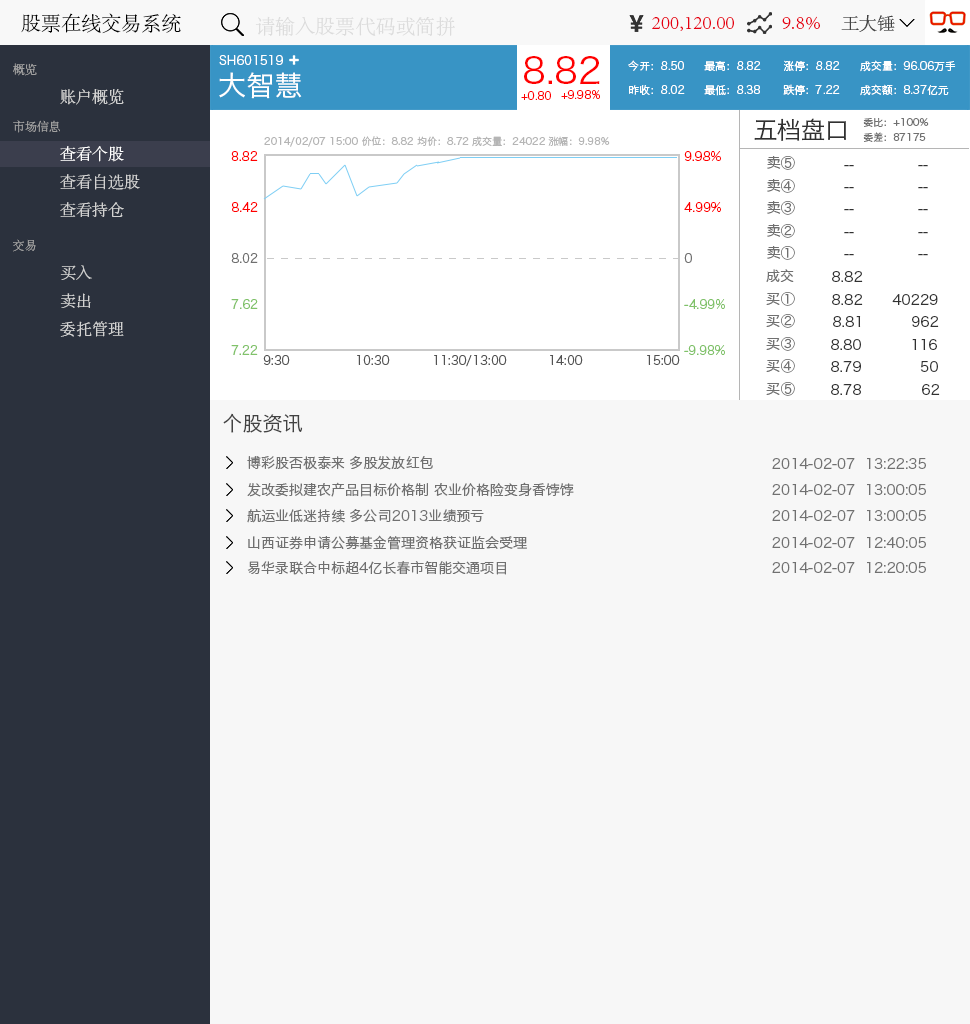
<style>
.page{position:relative;width:970px;height:1024px;background:#f7f7f7}
.page>*{position:absolute;margin:0}
.t1{font:20px "AdobeSongStd-Light";color:#000000}
.t2{font:20px "AdobeSongStd-Light";color:#dcdcdc}
.t3{font:20px "AdobeSongStd-Light";color:#e60012}
.t4{font:18px "AdobeSongStd-Light";color:#434343}
.t5{font:12px "AdobeSongStd-Light";color:#a0a0a0}
.t6{font:12px "HiraginoSansGB-W3";color:#ffffff}
.t7{font:36px "HiraginoSansGB-W3";color:#ff0000}
.t8{font:10.7px "HiraginoSansGB-W3";color:#ffffff}
.t9{font:28px "HiraginoSansGB-W3";color:#ffffff}
.t10{font:16px "AdobeSongStd-Light";color:#d2d2d2}
.t11{font:10.7px "HiraginoSansGB-W3";color:#ff0000}
.t12{font:24px "HiraginoSansGB-W3";color:#313131}
.t13{font:10px "HiraginoSansGB-W3";color:#707070}
.t14{font:10px "HiraginoSansGB-W3";color:#b5b5b5}
.t15{font:16px "AdobeSongStd-Light";color:#ffffff}
.t16{font:12px "HiraginoSansGB-W3";color:#ff0000}
.t17{font:14px "HiraginoSansGB-W3";color:#707070}
.t18{font:14px "HiraginoSansGB-W3";color:#313131}
.t19{font:12px "HiraginoSansGB-W3";color:#707070}
.t20{font:12px "HiraginoSansGB-W3";color:#80c269}
.t21{font:12px "HiraginoSansGB-W3";color:#535353}
.t22{font:20px "HiraginoSansGB-W3";color:#434343}
</style>
<div class="page">
<p class="t1" style="left:21px;top:13px;width:160px;height:21px">股票在线交易系统</p>
<p class="t2" style="left:255px;top:16px;width:200px;height:21px">请输入股票代码或简拼</p>
<p class="t3" style="left:652px;top:17px;width:82px;height:14px">200,120.00</p>
<p class="t3" style="left:782px;top:16px;width:38px;height:14px">9.8%</p>
<p class="t4" style="left:841px;top:15px;width:54px;height:17px">王大锤</p>
<p class="t5" style="left:13px;top:63px;width:24px;height:13px">概览</p>
<p class="t6" style="left:219px;top:55px;width:64px;height:10px">SH601519</p>
<p class="t7" style="left:524px;top:56px;width:76px;height:29px">8.82</p>
<p class="t8" style="left:628px;top:60px;width:56px;height:11px">今开：8.50</p>
<p class="t8" style="left:704px;top:61px;width:57px;height:11px">最高：8.82</p>
<p class="t8" style="left:784px;top:60px;width:56px;height:12px">涨停：8.82</p>
<p class="t8" style="left:860px;top:60px;width:96px;height:12px">成交量：96.06万手</p>
<p class="t9" style="left:219px;top:72px;width:83px;height:27px">大智慧</p>
<p class="t10" style="left:60px;top:89px;width:64px;height:16px">账户概览</p>
<p class="t8" style="left:629px;top:85px;width:56px;height:10px">昨收：8.02</p>
<p class="t8" style="left:704px;top:85px;width:56px;height:11px">最低：8.38</p>
<p class="t8" style="left:783px;top:84px;width:57px;height:12px">跌停：7.22</p>
<p class="t8" style="left:860px;top:84px;width:89px;height:12px">成交额：8.37亿元</p>
<p class="t11" style="left:521px;top:91px;width:30px;height:9px">+0.80</p>
<p class="t11" style="left:561px;top:90px;width:39px;height:9px">+9.98%</p>
<p class="t5" style="left:13px;top:120px;width:47px;height:13px">市场信息</p>
<p class="t12" style="left:754px;top:118px;width:92px;height:23px">五档盘口</p>
<p class="t13" style="left:863px;top:118px;width:66px;height:9px">委比：+100%</p>
<p class="t14" style="left:264px;top:136px;width:346px;height:11px">2014/02/07 15:00 价位：8.82 均价：8.72 成交量：24022 涨幅：9.98%</p>
<p class="t13" style="left:863px;top:132px;width:63px;height:10px">委差：87175</p>
<p class="t15" style="left:60px;top:146px;width:64px;height:16px">查看个股</p>
<p class="t16" style="left:231px;top:151px;width:27px;height:10px">8.82</p>
<p class="t16" style="left:684px;top:151px;width:37px;height:10px">9.98%</p>
<p class="t17" style="left:767px;top:156px;width:28px;height:14px">卖⑤</p>
<p class="t10" style="left:60px;top:174px;width:80px;height:16px">查看自选股</p>
<p class="t18" style="left:844px;top:165px;width:10px;height:2px">--</p>
<p class="t18" style="left:918px;top:165px;width:10px;height:2px">--</p>
<p class="t17" style="left:767px;top:179px;width:28px;height:14px">卖④</p>
<p class="t18" style="left:844px;top:187px;width:10px;height:2px">--</p>
<p class="t18" style="left:918px;top:187px;width:10px;height:2px">--</p>
<p class="t10" style="left:60px;top:202px;width:64px;height:15px">查看持仓</p>
<p class="t16" style="left:232px;top:202px;width:26px;height:10px">8.42</p>
<p class="t16" style="left:684px;top:202px;width:37px;height:10px">4.99%</p>
<p class="t17" style="left:767px;top:201px;width:28px;height:14px">卖③</p>
<p class="t18" style="left:844px;top:209px;width:10px;height:2px">--</p>
<p class="t18" style="left:918px;top:209px;width:10px;height:2px">--</p>
<p class="t17" style="left:767px;top:224px;width:28px;height:14px">卖②</p>
<p class="t18" style="left:844px;top:232px;width:10px;height:2px">--</p>
<p class="t18" style="left:918px;top:232px;width:10px;height:2px">--</p>
<p class="t5" style="left:13px;top:239px;width:23px;height:13px">交易</p>
<p class="t17" style="left:767px;top:246px;width:28px;height:14px">卖①</p>
<p class="t19" style="left:231px;top:253px;width:27px;height:10px">8.02</p>
<p class="t19" style="left:684px;top:253px;width:8px;height:10px">0</p>
<p class="t18" style="left:844px;top:254px;width:10px;height:2px">--</p>
<p class="t18" style="left:918px;top:254px;width:10px;height:2px">--</p>
<p class="t10" style="left:60px;top:265px;width:32px;height:15px">买入</p>
<p class="t17" style="left:766px;top:269px;width:28px;height:13px">成交</p>
<p class="t18" style="left:832px;top:271px;width:31px;height:11px">8.82</p>
<p class="t10" style="left:60px;top:293px;width:31px;height:15px">卖出</p>
<p class="t17" style="left:766px;top:292px;width:29px;height:14px">买①</p>
<p class="t18" style="left:832px;top:294px;width:31px;height:11px">8.82</p>
<p class="t18" style="left:892px;top:294px;width:46px;height:11px">40229</p>
<p class="t20" style="left:231px;top:299px;width:27px;height:10px">7.62</p>
<p class="t20" style="left:684px;top:299px;width:41px;height:10px">-4.99%</p>
<p class="t17" style="left:766px;top:314px;width:29px;height:14px">买②</p>
<p class="t18" style="left:833px;top:316px;width:28px;height:11px">8.81</p>
<p class="t18" style="left:912px;top:316px;width:27px;height:11px">962</p>
<p class="t10" style="left:60px;top:321px;width:64px;height:16px">委托管理</p>
<p class="t17" style="left:766px;top:337px;width:29px;height:14px">买③</p>
<p class="t18" style="left:831px;top:339px;width:30px;height:11px">8.80</p>
<p class="t18" style="left:912px;top:339px;width:25px;height:11px">116</p>
<p class="t20" style="left:231px;top:345px;width:27px;height:10px">7.22</p>
<p class="t20" style="left:684px;top:345px;width:41px;height:10px">-9.98%</p>
<p class="t21" style="left:263px;top:355px;width:27px;height:10px">9:30</p>
<p class="t21" style="left:357px;top:355px;width:33px;height:10px">10:30</p>
<p class="t21" style="left:434px;top:355px;width:73px;height:12px">11:30/13:00</p>
<p class="t21" style="left:550px;top:355px;width:33px;height:10px">14:00</p>
<p class="t21" style="left:647px;top:355px;width:33px;height:10px">15:00</p>
<p class="t17" style="left:766px;top:359px;width:29px;height:14px">买④</p>
<p class="t18" style="left:831px;top:361px;width:30px;height:11px">8.79</p>
<p class="t18" style="left:920px;top:361px;width:18px;height:11px">50</p>
<p class="t17" style="left:766px;top:382px;width:29px;height:14px">买⑤</p>
<p class="t18" style="left:831px;top:384px;width:30px;height:11px">8.78</p>
<p class="t18" style="left:922px;top:384px;width:18px;height:11px">62</p>
<p class="t22" style="left:223px;top:413px;width:80px;height:20px">个股资讯</p>
<p class="t17" style="left:247px;top:456px;width:186px;height:14px">博彩股否极泰来 多股发放红包</p>
<p class="t17" style="left:772px;top:458px;width:154px;height:11px">2014-02-07  13:22:35</p>
<p class="t17" style="left:247px;top:482px;width:327px;height:15px">发改委拟建农产品目标价格制 农业价格险变身香饽饽</p>
<p class="t17" style="left:772px;top:484px;width:154px;height:11px">2014-02-07  13:00:05</p>
<p class="t17" style="left:247px;top:509px;width:237px;height:14px">航运业低迷持续 多公司2013业绩预亏</p>
<p class="t17" style="left:772px;top:510px;width:154px;height:11px">2014-02-07  13:00:05</p>
<p class="t17" style="left:248px;top:535px;width:279px;height:15px">山西证券申请公募基金管理资格获证监会受理</p>
<p class="t17" style="left:772px;top:537px;width:154px;height:11px">2014-02-07  12:40:05</p>
<p class="t17" style="left:247px;top:561px;width:259px;height:14px">易华录联合中标超4亿长春市智能交通项目</p>
<p class="t17" style="left:772px;top:562px;width:154px;height:11px">2014-02-07  12:20:05</p>
</div>
